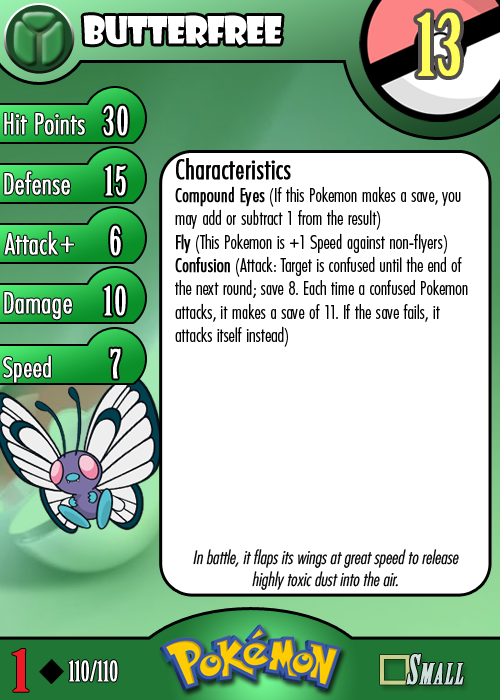
<style>
.page{position:relative;width:500px;height:700px;background:#ffffff}
.page>*{position:absolute;margin:0}
.t1{font:36.7px "ShowcardGothic-Reg";letter-spacing:-0.025em;color:#ffffff;scale:0.91 1}
.t2{font:83.3px "BirchStd";letter-spacing:0.025em;color:#fffd59;font-weight:bold}
.t3{font:27.8px "Futura-CondensedLight";color:#ffffff;font-weight:bold}
.t4{font:38.9px "BirchStd";letter-spacing:0.035em;color:#ffffff;font-weight:bold}
.t5{font:19.4px "FuturaCondensedBQ-Light";color:#010101}
.t6{font:27.8px "FuturaCondensedBQ-Light";color:#010101;font-weight:bold}
.t7{font:19.4px "FuturaCondensedBQ-Light";color:#010101;font-weight:bold}
.t8{font:30.6px "Futura-CondensedLight";color:#ffffff;font-weight:bold}
.t9{font:27.8px "FuturaCondensedBQ-Light";color:#ffffff;font-weight:bold}
.t10{font:18.1px "Futura-CondensedLight";color:#010101;font-style:italic}
.t11{font:55.6px "BirchStd";color:#ed1c24;font-weight:bold;scale:1.5 1}
.t12{font:27.8px "BirchStd";color:#ffffff;font-weight:bold}
</style>
<div class="page">
<p class="t1" style="left:83px;top:15px;width:199px;height:31px">butterfree</p>
<p class="t2" style="left:417px;top:12px;width:43px;height:64px">13</p>
<p class="t3" style="left:4px;top:113px;width:81px;height:22px">Hit Points</p>
<p class="t4" style="left:103px;top:105px;width:25px;height:31px">30</p>
<p class="t5" style="left:175px;top:158px;width:293px;height:189px"><span class="t6">Characteristics<br></span><span class="t7">Compound Eyes</span> (If this Pokemon makes a save, you may add or subtract 1 from the result)<br><span class="t7">Fly</span> (This Pokemon is +1 Speed against non-flyers)<br><span class="t7">Confusion</span> (Attack: Target is confused until the end of the next round; save 8. Each time a confused Pokemon attacks, it makes a save of 11. If the save fails, it attacks itself instead)</p>
<p class="t3" style="left:4px;top:171px;width:66px;height:24px">Defense</p>
<p class="t4" style="left:105px;top:165px;width:21px;height:31px">15</p>
<p class="t3" style="left:4px;top:231px;width:54px;height:24px">Attack</p>
<p class="t4" style="left:110px;top:225px;width:11px;height:31px">6</p>
<p class="t8" style="left:60px;top:236px;width:14px;height:17px">+</p>
<p class="t3" style="left:4px;top:292px;width:68px;height:28px">Damage</p>
<p class="t4" style="left:104px;top:285px;width:22px;height:31px">10</p>
<p class="t4" style="left:110px;top:348px;width:11px;height:31px">7</p>
<p class="t9" style="left:3px;top:355px;width:48px;height:28px">Speed</p>
<p class="t10" style="left:193px;top:549px;width:266px;height:41px;text-align:center">In battle, it flaps its wings at great speed to release highly toxic dust into the air.</p>
<p class="t11" style="left:12px;top:649px;width:17px;height:43px">1</p>
<p class="t12" style="left:68px;top:660px;width:50px;height:22px">110/110</p>
</div>
